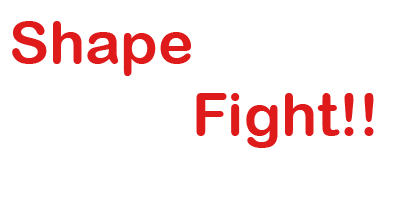
<style>
.page{position:relative;width:400px;height:200px;background:#ffffff}
.page>*{position:absolute;margin:0}
.t1{font:60px "ArialRoundedMTBold";color:#de1a1a}
</style>
<div class="page">
<p class="t1" style="left:12px;top:21px;width:362px;height:127px">Shape<br>        Fight!!</p>
</div>
